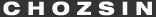
<style>
.page{position:relative;width:156px;height:17px;background:#333333}
.page>*{position:absolute;margin:0}
.t1{font:18px "HelveticaNeueLT-HeavyExt";color:#ffffff}
</style>
<div class="page">
<p class="t1" style="left:3px;top:1px;width:149px;height:15px">C H O Z S I N</p>
</div>
